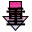
<style>
.page{position:relative;width:32px;height:32px;background:#ffffff}
.page>*{position:absolute;margin:0}
.t1{font:20.8px "HGSoeiKakugothicUB";color:#000000}
.t2{font:20.8px "HGSoeiKakugothicUB"}
</style>
<div class="page">
<p class="t1" style="left:6px;top:6px;width:20px;height:20px">重</p>
<p class="t2" style="left:6px;top:5px;width:20px;height:20px">重</p>
<p class="t2" style="left:6px;top:5px;width:20px;height:20px">重</p>
<p class="t1" style="left:6px;top:6px;width:20px;height:20px">重</p>
</div>
